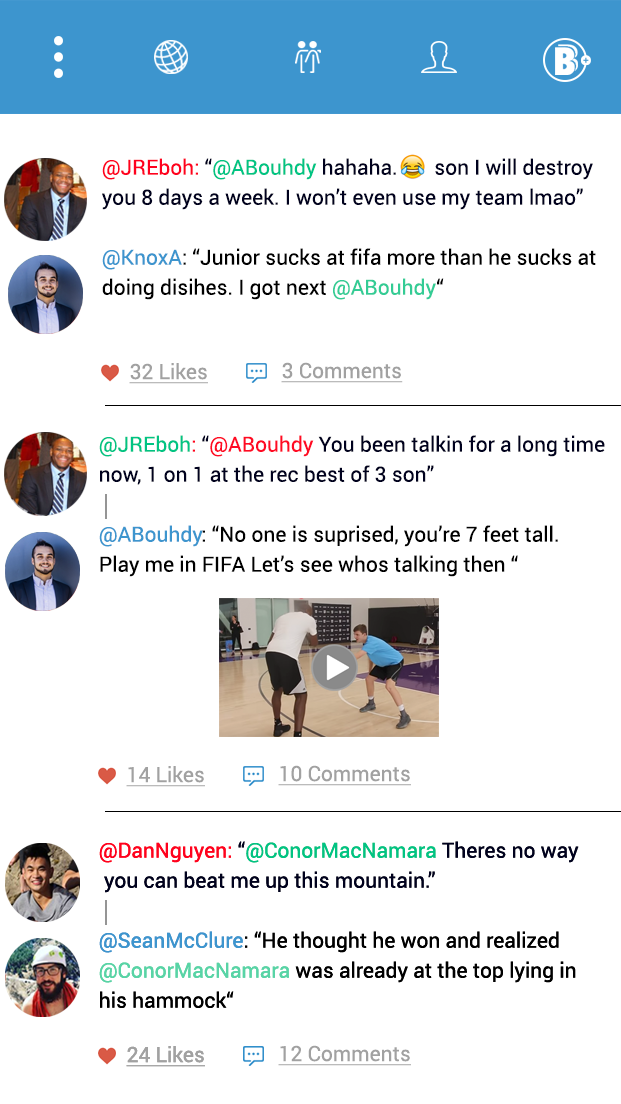
<style>
.page{position:relative;width:621px;height:1104px;background:#ffffff}
.page>*{position:absolute;margin:0}
.t1{font:21px/30px "Roboto-Regular";color:#00011e}
.t2{font:21px/30px "Roboto-Regular";color:#ff011e}
.t3{font:21px/30px "Roboto-Regular";color:#00c483}
.t4{font:21px/30px "Roboto-Regular";color:#3d95ce}
.t5{font:21px/30px "Roboto-Regular";color:#000000}
.t6{font:21px/30px "Roboto-Regular";color:#33cc95}
.t7{font:21px "Roboto-Regular";color:#a1a1a1;text-decoration:underline}
.t8{font:21px/30px "Roboto-Regular";color:#ff0a24}
.t9{font:21px/30px "Roboto-Regular";color:#58d4a6}
</style>
<div class="page">
<p class="t1" style="left:102px;top:158px;width:494px;height:142px"><span class="t2">@JREboh: </span>“<span class="t3">@ABouhdy </span>hahaha.       son I will destroy<br>you 8 days a week. I won’t even use my team lmao”<br><br><span class="t4">@KnoxA</span><span class="t5">: “Junior sucks at fifa more than he sucks at<br>doing disihes. I got next </span><span class="t6">@ABouhdy</span><span class="t5">“</span></p>
<p class="t7" style="left:129px;top:363px;width:79px;height:21px">32 Likes</p>
<p class="t7" style="left:281px;top:362px;width:122px;height:21px">3 Comments</p>
<p class="t5" style="left:99px;top:435px;width:506px;height:142px"><span class="t3">@JREboh</span><span class="t2">: </span><span class="t1">“</span><span class="t8">@ABouhdy </span><span class="t1">You been talkin for a long time<br>now, 1 on 1 at the rec best of 3 son”<br><br></span><span class="t4">@ABouhdy</span>: “No one is suprised, you’re 7 feet tall.<br>Play me in FIFA Let’s see whos talking then “</p>
<p class="t7" style="left:126px;top:766px;width:79px;height:21px">14 Likes</p>
<p class="t7" style="left:278px;top:765px;width:133px;height:21px">10 Comments</p>
<p class="t1" style="left:99px;top:841px;width:480px;height:167px"><span class="t2">@DanNguyen: </span>“<span class="t3">@ConorMacNamara </span>Theres no way<br> you can beat me up this mountain.”<br><br><span class="t4">@SeanMcClure</span><span class="t5">: “He thought he won and realized <br></span><span class="t9">@ConorMacNamara </span><span class="t5">was already at the top lying in<br>his hammock“</span></p>
<p class="t1" style="left:99px;top:841px;width:480px;height:167px"><span class="t2">@DanNguyen: </span>“<span class="t3">@ConorMacNamara </span>Theres no way<br> you can beat me up this mountain.”<br><br><span class="t4">@SeanMcClure</span><span class="t5">: “He thought he won and realized <br></span><span class="t9">@ConorMacNamara </span><span class="t5">was already at the top lying in<br>his hammock“</span></p>
<p class="t7" style="left:126px;top:1046px;width:79px;height:21px">24 Likes</p>
<p class="t7" style="left:126px;top:1046px;width:79px;height:21px">24 Likes</p>
<p class="t7" style="left:278px;top:1045px;width:133px;height:21px">12 Comments</p>
</div>
